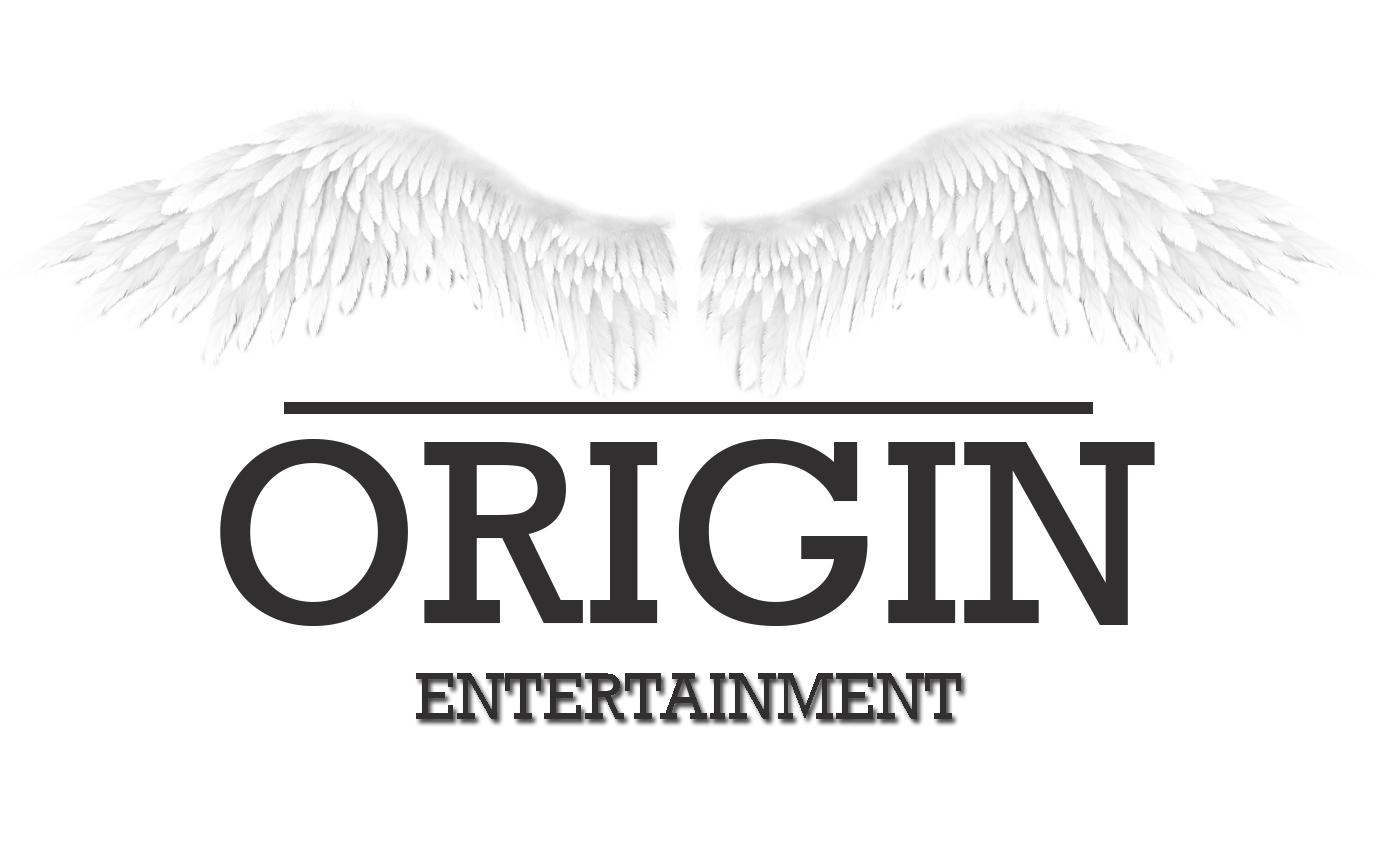
<style>
.page{position:relative;width:1376px;height:860px;background:#ffffff}
.page>*{position:absolute;margin:0}
.t1{font:266.7px "Rockwell";color:#312f2f}
</style>
<div class="page">
<p class="t1" style="left:220px;top:439px;width:935px;height:187px">ORIGIN</p>
</div>
